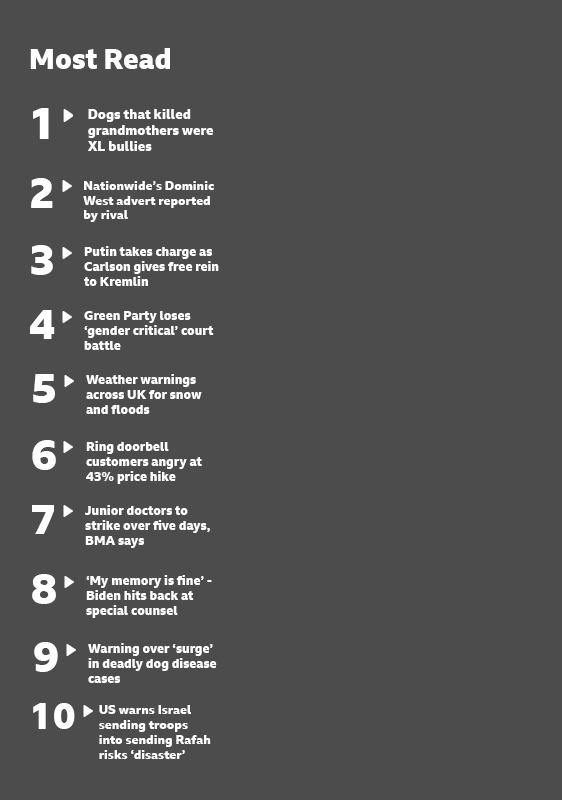
<style>
.page{position:relative;width:562px;height:800px;background:#4c4c4c}
.page>*{position:absolute;margin:0}
.t1{font:28px "BBCReithSans-XBold";color:#ffffff}
.t2{font:44.6px "BBCReithSans-XBold";color:#ffffff}
.t3{font:13.4px "BBCReithSans-XBold";color:#ffffff}
.t4{font:41.3px "BBCReithSans-XBold";color:#ffffff}
.t5{font:12.4px "BBCReithSans-XBold";color:#ffffff}
.t6{font:41.9px "BBCReithSans-XBold";color:#ffffff}
.t7{font:12.6px "BBCReithSans-XBold";color:#ffffff}
.t8{font:36px "BBCReithSans-XBold";color:#ffffff}
.t9{font:12.5px "BBCReithSans-XBold";color:#ffffff}
</style>
<div class="page">
<p class="t1" style="left:30px;top:48px;width:140px;height:21px">Most Read</p>
<p class="t2" style="left:33px;top:108px;width:16px;height:31px">1</p>
<p class="t3" style="left:88px;top:109px;width:126px;height:42px">Dogs that killed grandmothers were XL bullies</p>
<p class="t4" style="left:31px;top:178px;width:22px;height:30px">2</p>
<p class="t5" style="left:83px;top:181px;width:131px;height:41px">Nationwide’s Dominic West advert reported by rival</p>
<p class="t6" style="left:31px;top:245px;width:22px;height:30px">3</p>
<p class="t7" style="left:84px;top:246px;width:135px;height:40px">Putin takes charge as Carlson gives free rein to Kremlin</p>
<p class="t6" style="left:30px;top:310px;width:25px;height:29px">4</p>
<p class="t7" style="left:84px;top:311px;width:130px;height:39px">Green Party loses ‘gender critical’ court battle</p>
<p class="t6" style="left:33px;top:374px;width:22px;height:29px">5</p>
<p class="t7" style="left:86px;top:374px;width:116px;height:40px">Weather warnings across UK for snow and floods</p>
<p class="t6" style="left:32px;top:440px;width:24px;height:30px">6</p>
<p class="t7" style="left:86px;top:441px;width:116px;height:43px">Ring doorbell customers angry at 43% price hike</p>
<p class="t6" style="left:32px;top:505px;width:22px;height:29px">7</p>
<p class="t7" style="left:85px;top:505px;width:125px;height:43px">Junior doctors to strike over five days, BMA says</p>
<p class="t6" style="left:32px;top:574px;width:24px;height:30px">8</p>
<p class="t7" style="left:86px;top:575px;width:126px;height:43px">‘My memory is fine’ - Biden hits back at special counsel</p>
<p class="t6" style="left:34px;top:642px;width:24px;height:30px">9</p>
<p class="t7" style="left:88px;top:643px;width:129px;height:40px">Warning over ‘surge’ in deadly dog disease cases</p>
<p class="t8" style="left:33px;top:703px;width:42px;height:26px">10</p>
<p class="t9" style="left:99px;top:705px;width:112px;height:54px">US warns Israel sending troops into sending Rafah risks ‘disaster’</p>
</div>
